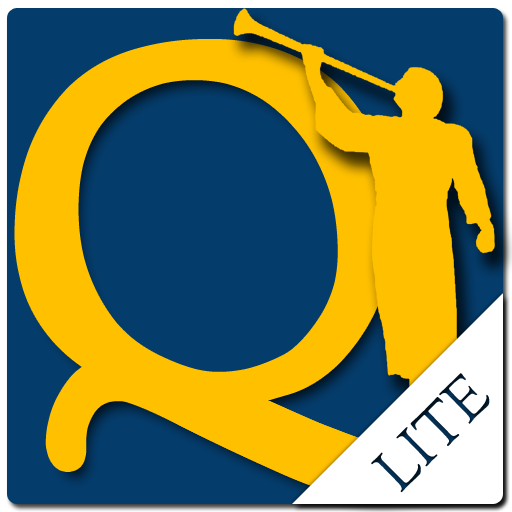
<style>
.page{position:relative;width:512px;height:512px;background:#043c6b}
.page>*{position:absolute;margin:0}
.t1{font:481.1px "OFLGoudyStMTT";color:#ffc000}
.t2{font:59.3px "OFLGoudyStMTT"}
</style>
<div class="page">
<p class="t1" style="left:24px;top:49px;width:431px;height:440px">Q</p>
<p class="t2" style="left:371px;top:373px;width:119px;height:120px;rotate:-45deg">LITE</p>
</div>
